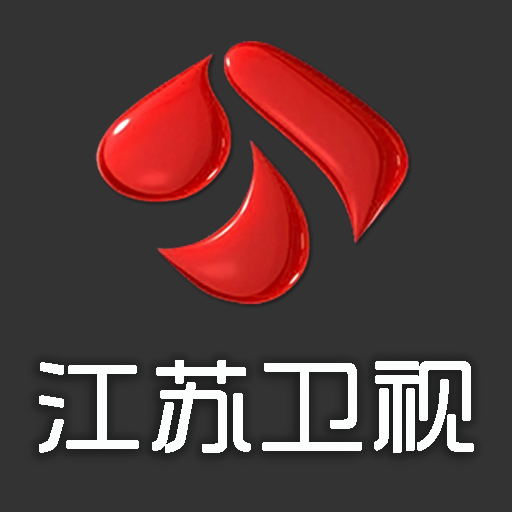
<style>
.page{position:relative;width:512px;height:512px;background:#333333}
.page>*{position:absolute;margin:0}
.t1{font:106.7px "SJshishang-Regular";letter-spacing:0.02em;color:#fcfdfd;font-weight:bold}
</style>
<div class="page">
<p class="t1" style="left:39px;top:360px;width:435px;height:93px">江苏卫视</p>
</div>
